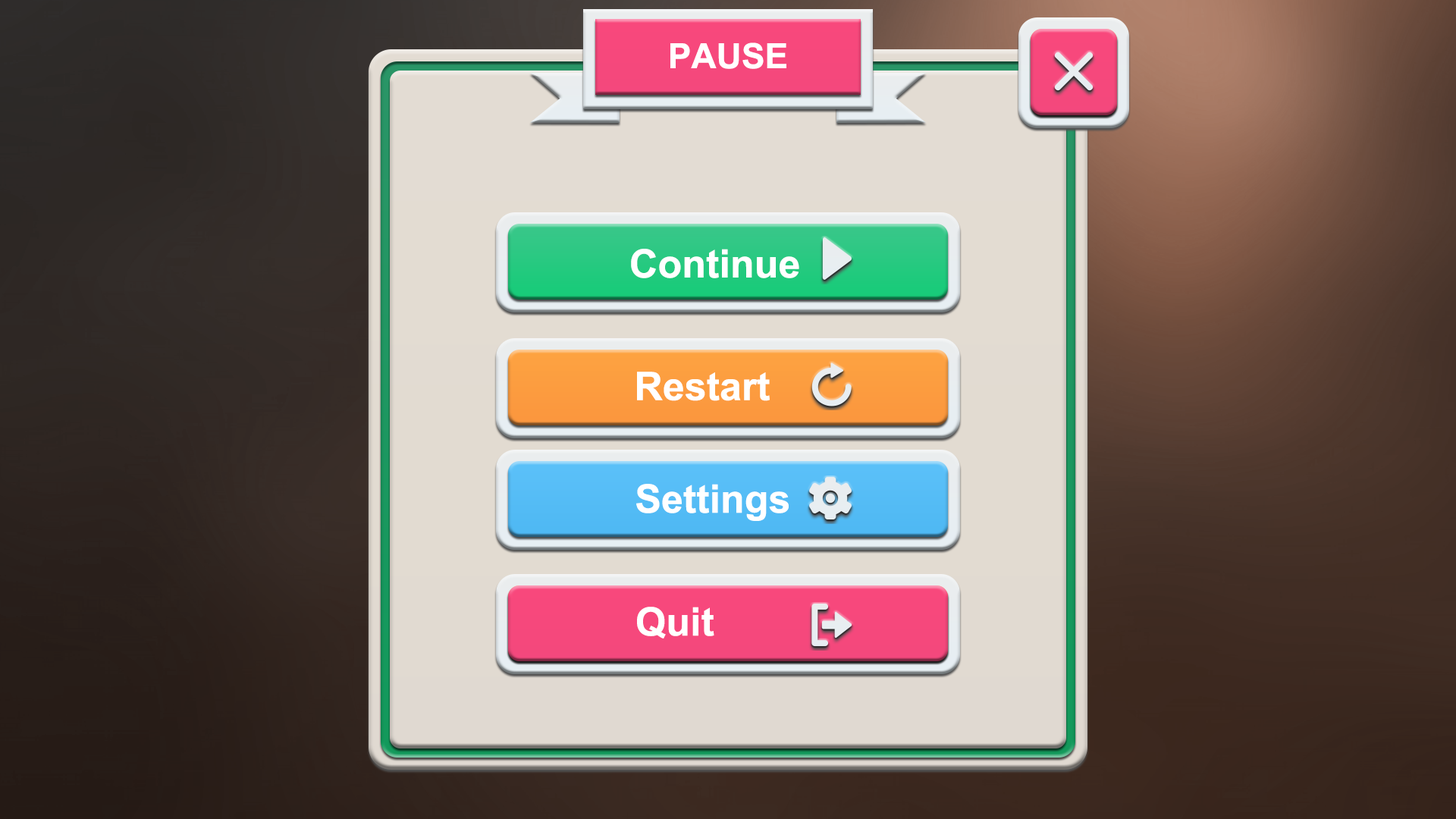
<style>
.page{position:relative;width:1456px;height:819px}
.page>*{position:absolute;margin:0}
.t1{font:34.9px "Arial-BoldMT";color:#ffffff}
.t2{font:39.4px "Arial-BoldMT";color:#ffffff}
</style>
<div class="page">
<p class="t1" style="left:670px;top:42px;width:116px;height:27px">PAUSE</p>
<p class="t2" style="left:631px;top:249px;width:168px;height:29px">Continue</p>
<p class="t2" style="left:637px;top:372px;width:133px;height:29px">Restart</p>
<p class="t2" style="left:636px;top:484px;width:153px;height:37px">Settings</p>
<p class="t2" style="left:637px;top:607px;width:77px;height:32px">Quit</p>
</div>
